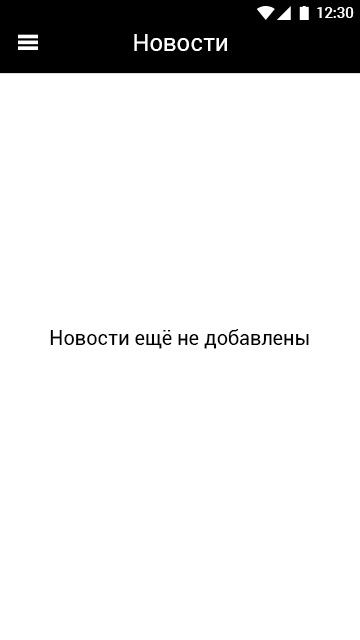
<style>
.page{position:relative;width:360px;height:640px;background:#ffffff}
.page>*{position:absolute;margin:0}
.t1{font:14.7px "Roboto-Medium";color:#ffffff}
.t2{font:24px "Roboto-Regular";color:#ffffff}
.t3{font:20px "Roboto-Regular";color:#000000}
</style>
<div class="page">
<p class="t1" style="left:317px;top:7px;width:37px;height:11px">12:30</p>
<p class="t2" style="left:134px;top:34px;width:93px;height:17px">Новости</p>
<p class="t3" style="left:50px;top:329px;width:259px;height:20px">Новости ещё не добавлены</p>
</div>
